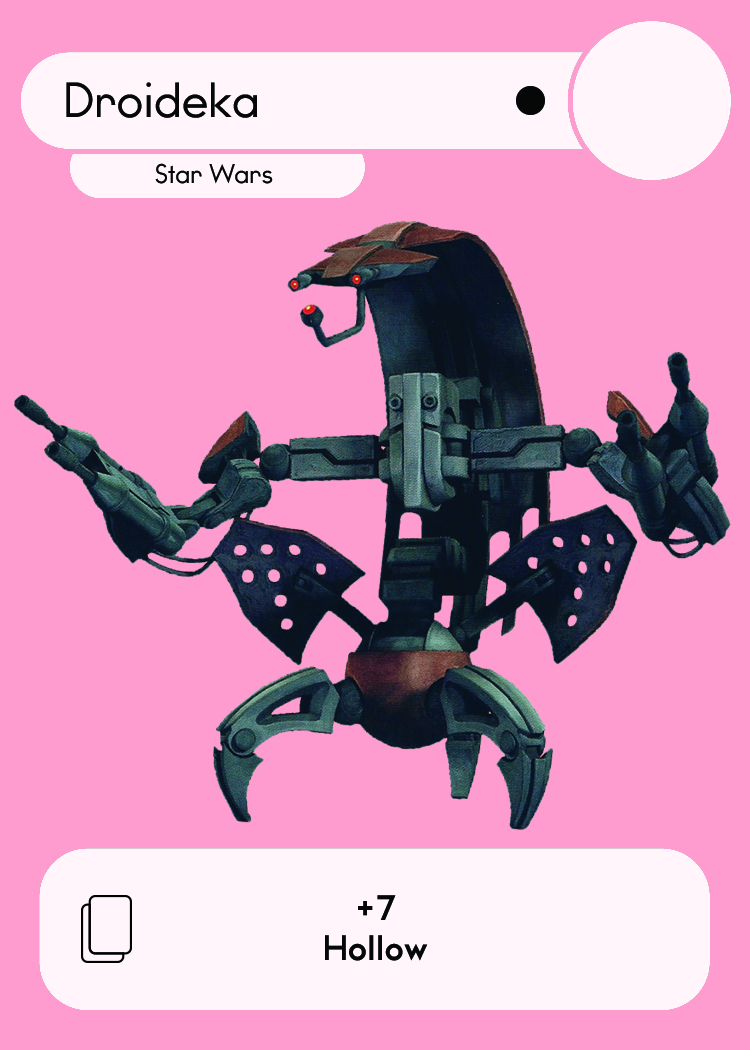
<style>
.page{position:relative;width:750px;height:1050px;background:#ff9ccf}
.page>*{position:absolute;margin:0}
.t1{font:46.7px "WatchwordRegularDemo";color:#060808}
.t2{font:25.5px "WatchwordRegularDemo";color:#060808}
.t3{font:33.3px "WatchwordBoldDemo";color:#060808}
</style>
<div class="page">
<p class="t1" style="left:66px;top:82px;width:191px;height:36px">Droideka</p>
<p class="t2" style="left:155px;top:163px;width:118px;height:21px">Star Wars</p>
<p class="t3" style="left:325px;top:895px;width:103px;height:66px;text-align:center">+7<br>Hollow</p>
</div>
